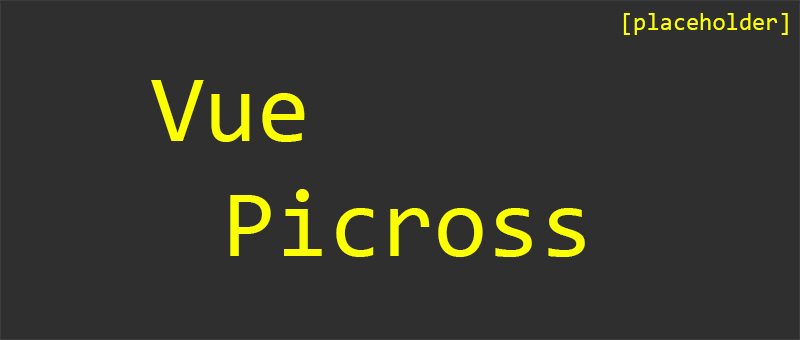
<style>
.page{position:relative;width:800px;height:340px;background:#2f2f2f}
.page>*{position:absolute;margin:0}
.t1{font:24px "Consolas";color:#fcff01}
.t2{font:96px "Consolas";color:#fcff01}
</style>
<div class="page">
<p class="t1" style="left:623px;top:13px;width:165px;height:22px">[placeholder]</p>
<p class="t2" style="left:151px;top:80px;width:434px;height:177px">Vue<br> Picross</p>
</div>
